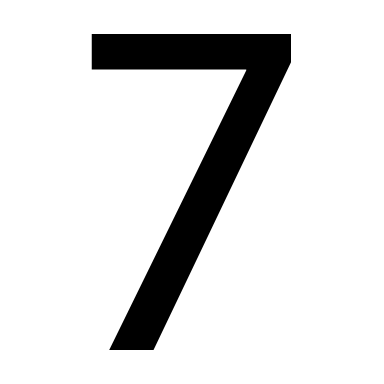
<style>
.page{position:relative;width:384px;height:384px;background:#ffffff}
.page>*{position:absolute;margin:0}
.t1{font:486.1px "MyriadPro-Regular";color:#000000}
</style>
<div class="page">
<p class="t1" style="left:91px;top:34px;width:200px;height:316px">7</p>
</div>
